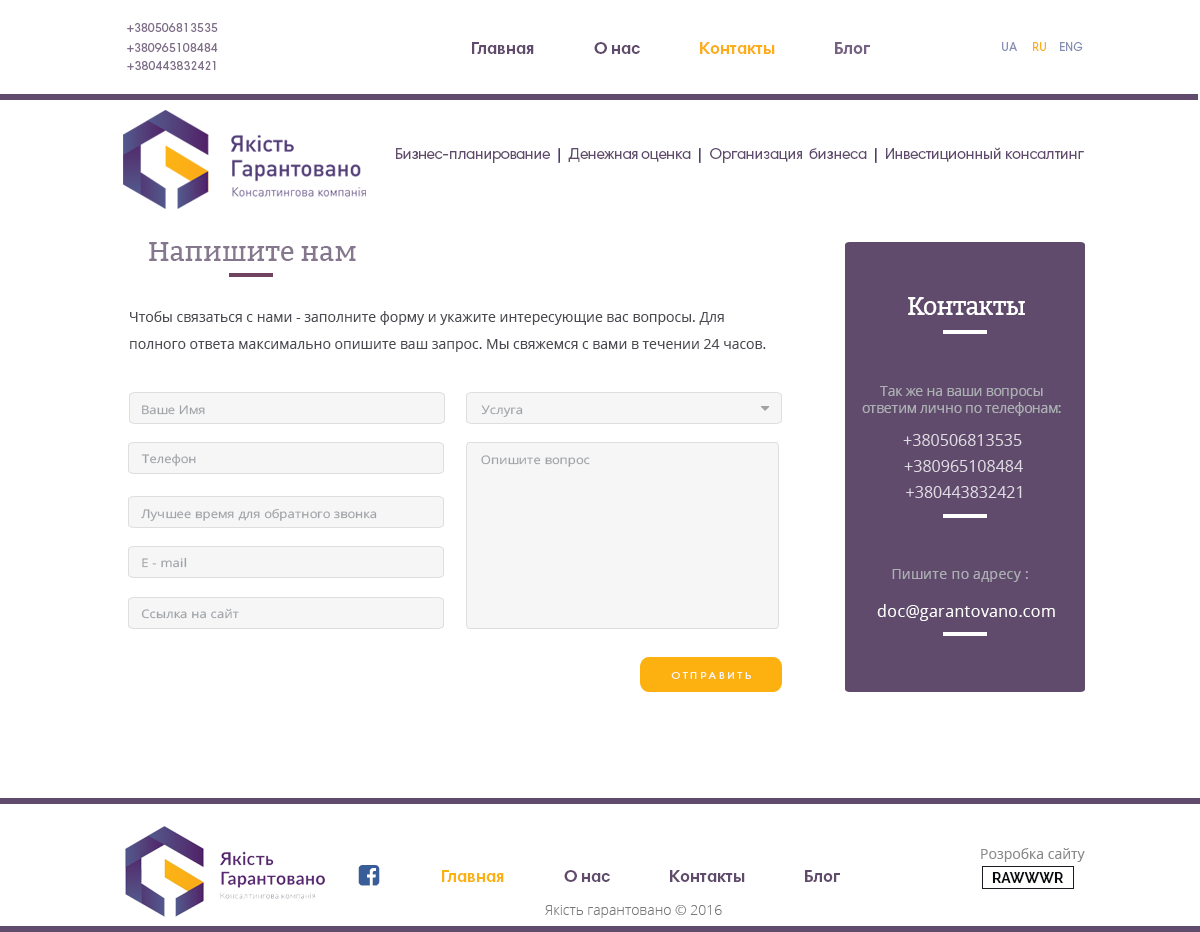
<style>
.page{position:relative;width:1200px;height:932px;background:#ffffff}
.page>*{position:absolute;margin:0}
.t1{font:12px "HarmoniaSansProCyr-Regular";color:#806f89}
.t2{font:17px "HarmoniaSansProCyr-Bold";color:#604b6c}
.t3{font:17px "HarmoniaSansProCyr-Bold";color:#fcad17}
.t4{font:12px "HarmoniaSansProCyr-Regular";color:#858eb3}
.t5{font:12px "HarmoniaSansProCyr-Regular";color:#fdaf19}
.t6{font:15.3px "HarmoniaSansProCyr-Regular";letter-spacing:-0.025em;color:#604b6c}
.t7{font:15.3px "HarmoniaSansProCyr-Bold";color:#533774}
.t8{font:15.3px "HarmoniaSansProCyr-Regular";letter-spacing:-0.017em;color:#604a6e}
.t9{font:27px "Bitter-Regular";color:#85778d}
.t10{font:25px "Bitter-Regular";letter-spacing:-0.025em;color:#ffffff}
.t11{font:14px/27px "OpenSans";color:#4a4b51}
.t12{font:14px "OpenSans";letter-spacing:-0.025em;color:#acafb3}
.t13{font:11.7px "OpenSans";color:#9fa3a7;scale:1.1 1}
.t14{font:16px "OpenSans";letter-spacing:0.01em;color:#dfdbe2}
.t15{font:14px "OpenSans";letter-spacing:0.01em;color:#acafb3}
.t16{font:16px "OpenSans";letter-spacing:0.01em;color:#ffffff}
.t17{font:10px "HarmoniaSansProCyr-Regular";letter-spacing:0.24em;color:#f6f6f6;text-transform:uppercase;scale:1.11 1}
.t18{font:14px "OpenSans";color:#8a8a8b}
.t19{font:17px "HarmoniaSansProCyr-Bold";color:#fdb111}
.t20{font:14px "Raleway-Bold";color:#07080c}
.t21{font:14px "OpenSans-Light";color:#787878}
</style>
<div class="page">
<p class="t1" style="left:127px;top:23px;width:91px;height:9px">+380506813535</p>
<p class="t1" style="left:127px;top:43px;width:91px;height:9px">+380965108484</p>
<p class="t2" style="left:472px;top:42px;width:62px;height:12px">Главная</p>
<p class="t2" style="left:594px;top:42px;width:46px;height:12px">О нас</p>
<p class="t3" style="left:700px;top:42px;width:75px;height:12px">Контакты</p>
<p class="t2" style="left:835px;top:42px;width:35px;height:12px">Блог</p>
<p class="t4" style="left:1002px;top:42px;width:44px;height:9px">UA    <span class="t5"> RU</span></p>
<p class="t4" style="left:1060px;top:42px;width:23px;height:9px">ENG</p>
<p class="t1" style="left:127px;top:61px;width:89px;height:9px">+380443832421</p>
<p class="t6" style="left:396px;top:148px;width:154px;height:15px">Бизнес-планирование</p>
<p class="t7" style="left:558px;top:148px;width:2px;height:15px">|</p>
<p class="t8" style="left:568px;top:148px;width:123px;height:14px">Денежная оценка</p>
<p class="t7" style="left:699px;top:148px;width:2px;height:15px">|</p>
<p class="t8" style="left:710px;top:148px;width:157px;height:15px">Организация  бизнеса</p>
<p class="t7" style="left:875px;top:148px;width:2px;height:15px">|</p>
<p class="t8" style="left:886px;top:147px;width:198px;height:15px">Инвестиционный консалтинг</p>
<p class="t9" style="left:149px;top:242px;width:207px;height:19px">Напишите нам</p>
<p class="t10" style="left:908px;top:297px;width:117px;height:18px">Контакты</p>
<p class="t11" style="left:130px;top:311px;width:636px;height:41px">Чтобы связаться с нами - заполните форму и укажите интересующие вас вопросы. Для полного ответа максимально опишите ваш запрос. Мы свяжемся с вами в течении 24 часов.</p>
<p class="t12" style="left:862px;top:386px;width:199px;height:30px;text-align:center">Так же на ваши вопросы ответим лично по телефонам:</p>
<p class="t13" style="left:142px;top:405px;width:63px;height:10px">Ваше Имя</p>
<p class="t13" style="left:481px;top:405px;width:42px;height:12px">Услуга</p>
<p class="t14" style="left:903px;top:434px;width:119px;height:12px">+380506813535</p>
<p class="t13" style="left:141px;top:453px;width:55px;height:13px">Телефон</p>
<p class="t13" style="left:481px;top:455px;width:109px;height:12px">Опишите вопрос</p>
<p class="t14" style="left:904px;top:460px;width:119px;height:12px">+380965108484</p>
<p class="t14" style="left:906px;top:486px;width:116px;height:12px">+380443832421</p>
<p class="t13" style="left:141px;top:508px;width:236px;height:13px">Лучшее время для обратного звонка</p>
<p class="t13" style="left:142px;top:557px;width:45px;height:11px">E - mail</p>
<p class="t15" style="left:892px;top:569px;width:136px;height:13px">Пишите по адресу :</p>
<p class="t16" style="left:877px;top:604px;width:178px;height:17px">doc@garantovano.com</p>
<p class="t13" style="left:141px;top:608px;width:98px;height:11px">Ссылка на сайт</p>
<p class="t17" style="left:671px;top:672px;width:80px;height:7px">Отправить</p>
<p class="t18" style="left:981px;top:848px;width:104px;height:14px">Розробка сайту</p>
<p class="t19" style="left:442px;top:870px;width:62px;height:12px">Главная</p>
<p class="t2" style="left:564px;top:870px;width:46px;height:12px">О нас</p>
<p class="t2" style="left:670px;top:870px;width:75px;height:12px">Контакты</p>
<p class="t2" style="left:805px;top:870px;width:35px;height:12px">Блог</p>
<p class="t20" style="left:992px;top:872px;width:72px;height:11px">RAWWWR</p>
<p class="t21" style="left:545px;top:905px;width:177px;height:13px">Якість гарантовано © 2016</p>
</div>
